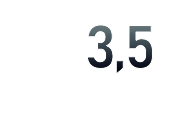
<style>
.page{position:relative;width:175px;height:133px;background:#ffffff}
.page>*{position:absolute;margin:0}
.t1{font:60px "Bahnschrift-SemiBold";letter-spacing:-0.05em}
</style>
<div class="page">
<p class="t1" style="left:87px;top:25px;width:66px;height:49px">3,5</p>
</div>
